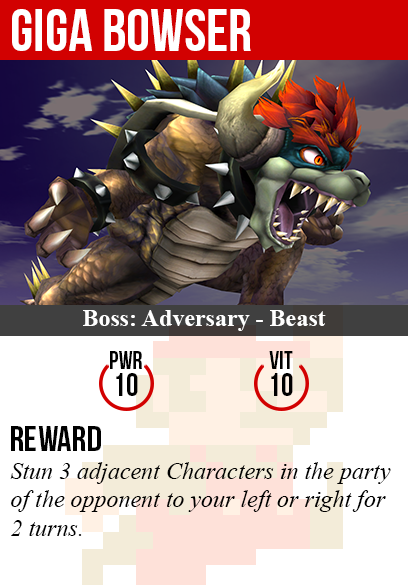
<style>
.page{position:relative;width:408px;height:585px;background:#ffffff}
.page>*{position:absolute;margin:0}
.t1{font:60px "BebasNeue";color:#ffffff}
.t2{font:24px "TimesNewRomanPS-BoldMT";color:#ffffff}
.t3{font:25px "BebasNeue";color:#000000}
.t4{font:32px "BebasNeue";color:#000000}
.t5{font:36px "BebasNeue";color:#000000}
.t6{font:24px "TimesNewRomanPS-ItalicMT";color:#000000}
</style>
<div class="page">
<p class="t1" style="left:12px;top:9px;width:239px;height:42px">giga bowser</p>
<p class="t2" style="left:83px;top:310px;width:243px;height:21px">Boss: Adversary - Beast</p>
<p class="t3" style="left:110px;top:351px;width:32px;height:18px">PWR</p>
<p class="t3" style="left:269px;top:351px;width:24px;height:18px">vit</p>
<p class="t4" style="left:116px;top:373px;width:22px;height:23px">10</p>
<p class="t4" style="left:271px;top:373px;width:22px;height:23px">10</p>
<p class="t5" style="left:11px;top:426px;width:90px;height:25px">reward</p>
<p class="t6" style="left:10px;top:462px;width:381px;height:74px">Stun 3 adjacent Characters in the party<br>of the opponent to your left or right for<br>2 turns.</p>
</div>
